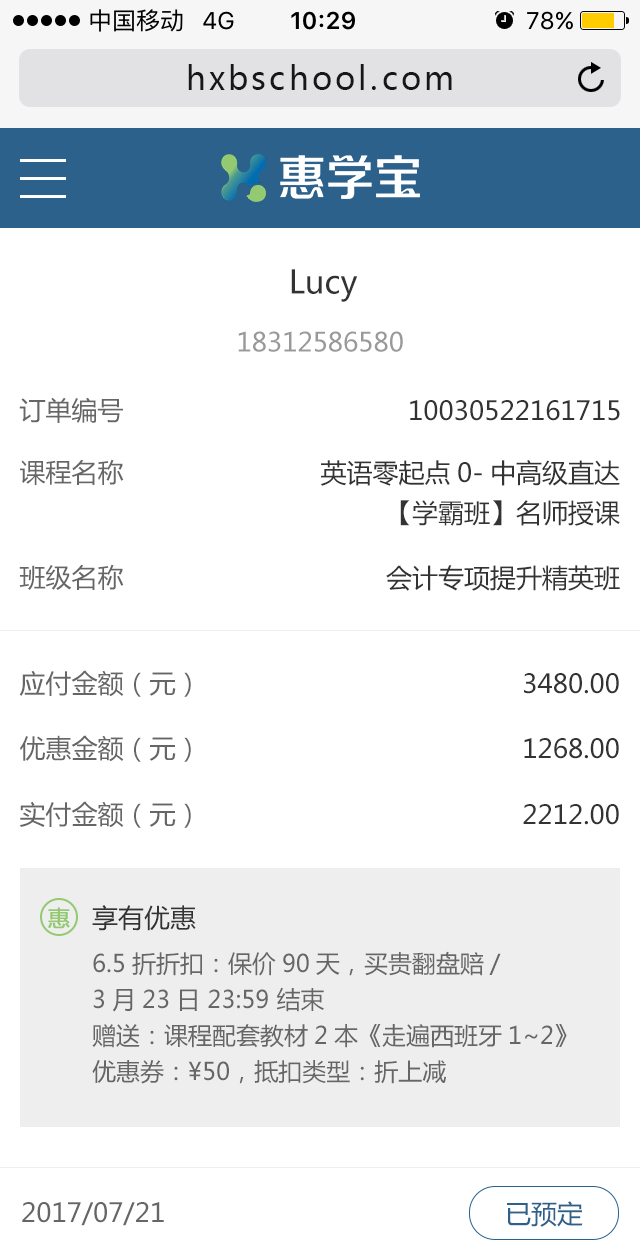
<style>
.page{position:relative;width:640px;height:1250px;background:#ffffff}
.page>*{position:absolute;margin:0}
.t1{font:32px "MicrosoftYaHei";letter-spacing:0.1em;color:#171717}
.t2{font:32px "MicrosoftYaHei";color:#333333}
.t3{font:26px "MicrosoftYaHei";color:#999999}
.t4{font:26px "MicrosoftYaHei";color:#666666}
.t5{font:26px "MicrosoftYaHei";color:#333333}
.t6{font:26px/40px "MicrosoftYaHei";color:#333333}
.t7{font:22px "MicrosoftYaHei";color:#93c971;font-weight:bold}
.t8{font:24px/36px "MicrosoftYaHei";color:#666666}
.t9{font:26px "MicrosoftYaHei";color:#2c618b}
</style>
<div class="page">
<p class="t1" style="left:188px;top:64px;width:264px;height:26px">hxbschool.com</p>
<p class="t2" style="left:291px;top:269px;width:67px;height:33px">Lucy</p>
<p class="t3" style="left:238px;top:331px;width:165px;height:21px">18312586580</p>
<p class="t4" style="left:19px;top:397px;width:104px;height:26px">订单编号</p>
<p class="t5" style="left:410px;top:400px;width:210px;height:21px">10030522161715</p>
<p class="t4" style="left:20px;top:459px;width:104px;height:26px">课程名称</p>
<p class="t6" style="left:320px;top:460px;width:300px;height:66px;text-align:right">英语零起点0-中高级直达<br>【学霸班】名师授课</p>
<p class="t4" style="left:19px;top:564px;width:105px;height:26px">班级名称</p>
<p class="t5" style="left:386px;top:565px;width:234px;height:26px">会计专项提升精英班</p>
<p class="t4" style="left:19px;top:670px;width:172px;height:27px">应付金额（元）</p>
<p class="t5" style="left:524px;top:673px;width:95px;height:21px">3480.00</p>
<p class="t4" style="left:20px;top:735px;width:171px;height:27px">优惠金额（元）</p>
<p class="t5" style="left:524px;top:738px;width:95px;height:21px">1268.00</p>
<p class="t4" style="left:19px;top:801px;width:172px;height:27px">实付金额（元）</p>
<p class="t5" style="left:523px;top:804px;width:96px;height:21px">2212.00</p>
<p class="t5" style="left:92px;top:905px;width:104px;height:26px">享有优惠</p>
<p class="t7" style="left:48px;top:907px;width:22px;height:22px">惠</p>
<p class="t8" style="left:92px;top:951px;width:475px;height:133px">6.5折折扣：保价90天，买贵翻盘赔/   <br>3月23日 23:59 结束<br>赠送：课程配套教材2本《走遍西班牙1~2》<br>优惠券：¥50，抵扣类型：折上减</p>
<p class="t4" style="left:22px;top:1202px;width:142px;height:24px">2017/07/21</p>
<p class="t9" style="left:507px;top:1201px;width:76px;height:26px">已预定</p>
</div>
